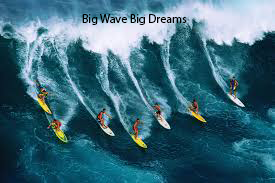
<style>
.page{position:relative;width:275px;height:183px}
.page>*{position:absolute;margin:0}
.t1{font:12px "MyriadPro-Regular";color:#000000}
</style>
<div class="page">
<p class="t1" style="left:82px;top:14px;width:105px;height:11px">Big Wave Big Dreams</p>
</div>
